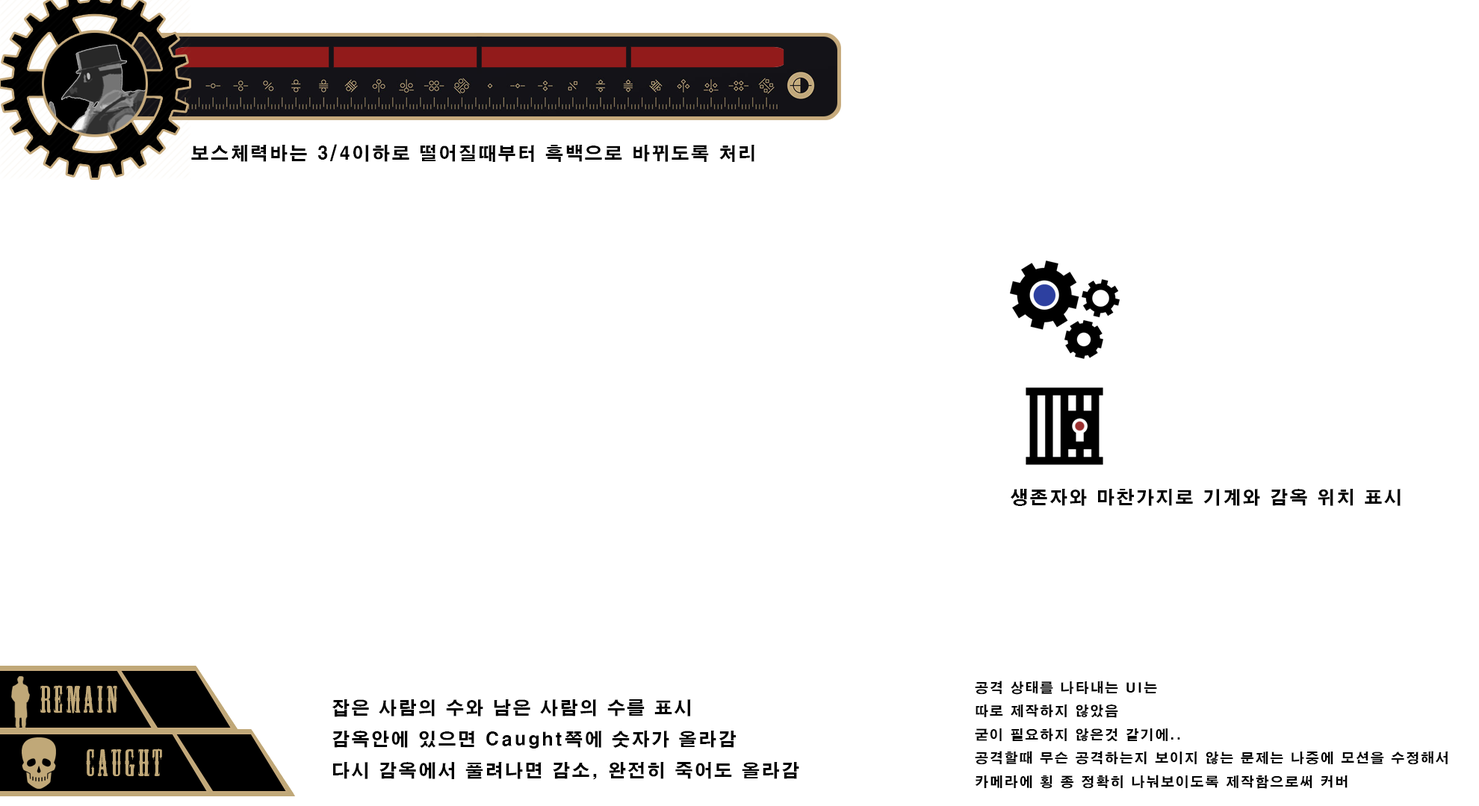
<style>
.page{position:relative;width:1479px;height:806px;background:#ffffff}
.page>*{position:absolute;margin:0}
.t1{font:17.9px "H2gtrE";letter-spacing:0.1em;color:#000000}
.t2{font:35.8px "MesquiteStd";letter-spacing:0.1em;color:#c0a878}
.t3{font:13.4px "H2gtrE";letter-spacing:0.1em;color:#000000}
</style>
<div class="page">
<p class="t1" style="left:191px;top:144px;width:563px;height:18px">보스체력바는 3/4이하로 떨어질때부터 흑백으로 바뀌도록 처리</p>
<p class="t1" style="left:1010px;top:489px;width:390px;height:17px">생존자와 마찬가지로 기계와 감옥 위치 표시</p>
<p class="t2" style="left:40px;top:686px;width:77px;height:28px">REmain</p>
<p class="t3" style="left:975px;top:681px;width:473px;height:108px">공격 상태를 나타내는 UI는<br>따로 제작하지 않았음<br>굳이 필요하지 않은것 같기에..<br>공격할때 무슨 공격하는지 보이지 않는 문제는 나중에 모션을 수정해서<br>카메라에 횡 종 정확히 나눠보이도록 제작함으로써 커버</p>
<p class="t1" style="left:332px;top:700px;width:467px;height:80px">잡은 사람의 수와 남은 사람의 수를 표시<br>감옥안에 있으면 Caught쪽에 숫자가 올라감<br>다시 감옥에서 풀려나면 감소, 완전히 죽어도 올라감</p>
<p class="t2" style="left:86px;top:749px;width:76px;height:28px">caught</p>
</div>
